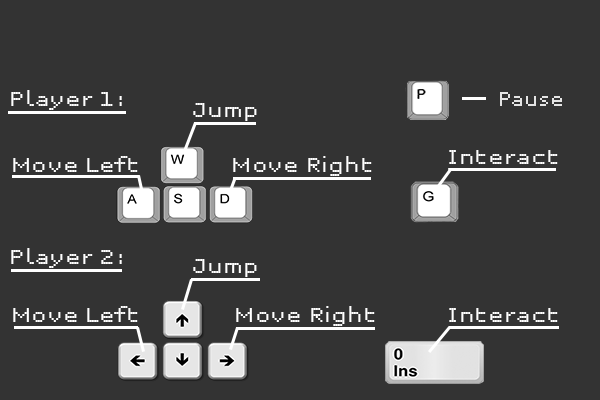
<style>
.page{position:relative;width:600px;height:400px;background:#333333}
.page>*{position:absolute;margin:0}
.t1{font:16px "Unibody8Pro-Regular";color:#ffffff;scale:1.12 1}
.t2{font:16px "Unibody8Pro-Regular"}
.t3{font:16px "Unibody8Pro-Regular";color:#fefefe;scale:1.12 1}
</style>
<div class="page">
<p class="t1" style="left:11px;top:90px;width:111px;height:20px">Player 1:</p>
<p class="t2" style="left:500px;top:92px;width:62px;height:14px">Pause</p>
<p class="t1" style="left:193px;top:103px;width:64px;height:18px">Jump</p>
<p class="t3" style="left:449px;top:150px;width:109px;height:14px">Interact</p>
<p class="t1" style="left:13px;top:156px;width:125px;height:16px">Move Left</p>
<p class="t1" style="left:233px;top:156px;width:139px;height:20px">Move Right</p>
<p class="t1" style="left:11px;top:248px;width:111px;height:20px">Player 2:</p>
<p class="t1" style="left:193px;top:259px;width:64px;height:18px">Jump</p>
<p class="t1" style="left:13px;top:306px;width:125px;height:16px">Move Left</p>
<p class="t1" style="left:236px;top:306px;width:139px;height:20px">Move Right</p>
<p class="t1" style="left:449px;top:308px;width:109px;height:14px">Interact</p>
</div>
